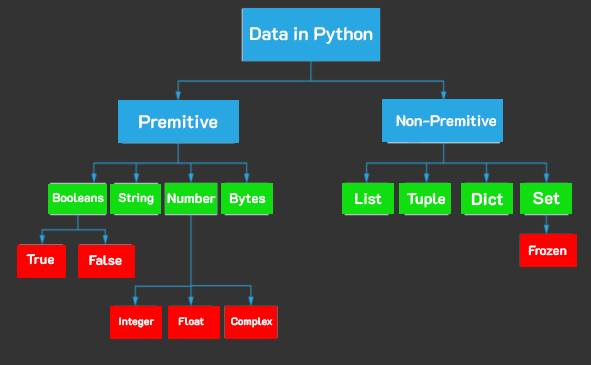
<style>
.page{position:relative;width:591px;height:365px;background:#333333}
.page>*{position:absolute;margin:0}
.t1{font:18.4px "K2D-Bold";color:#ffffff}
.t2{font:15.4px "K2D-Bold";color:#ffffff}
.t3{font:12.4px "K2D-Bold";color:#ffffff}
.t4{font:13.7px "K2D-Bold";color:#ffffff}
.t5{font:17.1px "K2D-Bold";color:#ffffff}
.t6{font:13.1px "K2D-Bold";color:#ffffff}
.t7{font:10.8px "K2D-Bold";color:#ffffff}
</style>
<div class="page">
<p class="t1" style="left:250px;top:27px;width:123px;height:17px">Data in Python</p>
<p class="t1" style="left:139px;top:115px;width:79px;height:14px">Premitive</p>
<p class="t2" style="left:396px;top:115px;width:101px;height:12px">Non-Premitive</p>
<p class="t3" style="left:52px;top:193px;width:52px;height:10px">Booleans</p>
<p class="t3" style="left:118px;top:193px;width:36px;height:12px">String</p>
<p class="t4" style="left:167px;top:193px;width:49px;height:11px">Number</p>
<p class="t4" style="left:229px;top:193px;width:37px;height:13px">Bytes</p>
<p class="t2" style="left:355px;top:193px;width:27px;height:12px">List</p>
<p class="t2" style="left:406px;top:193px;width:40px;height:15px">Tuple</p>
<p class="t5" style="left:471px;top:192px;width:32px;height:14px">Dict</p>
<p class="t5" style="left:533px;top:191px;width:27px;height:14px">Set</p>
<p class="t6" style="left:528px;top:245px;width:39px;height:11px">Frozen</p>
<p class="t4" style="left:26px;top:254px;width:29px;height:11px">True</p>
<p class="t4" style="left:89px;top:255px;width:33px;height:11px">False</p>
<p class="t7" style="left:119px;top:317px;width:35px;height:11px">Integer</p>
<p class="t7" style="left:178px;top:317px;width:26px;height:9px">Float</p>
<p class="t7" style="left:231px;top:317px;width:42px;height:11px">Complex</p>
</div>
